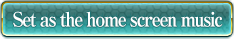
<style>
.page{position:relative;width:234px;height:39px}
.page>*{position:absolute;margin:0}
.t1{font:20px "RyuminPro-ExBold";letter-spacing:-0.08em;color:#ffffff;scale:0.9 1}
</style>
<div class="page">
<p class="t1" style="left:13px;top:11px;width:210px;height:16px">Set as the home screen music</p>
</div>
